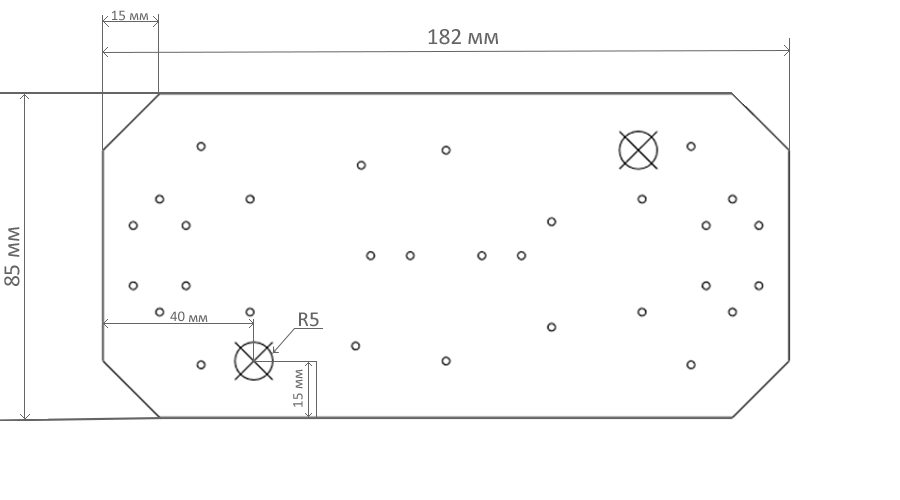
<style>
.page{position:relative;width:900px;height:500px;background:#ffffff}
.page>*{position:absolute;margin:0}
.t1{font:14.7px "Calibri";color:#656565}
.t2{font:23.5px "Calibri";color:#656565}
.t3{font:21.3px "Calibri";color:#656565}
</style>
<div class="page">
<p class="t1" style="left:112px;top:10px;width:36px;height:11px">15 мм</p>
<p class="t2" style="left:428px;top:29px;width:70px;height:16px">182 мм</p>
<p class="t2" style="left:4px;top:227px;width:16px;height:59px;rotate:-90deg">85 мм</p>
<p class="t1" style="left:170px;top:311px;width:38px;height:11px">40 мм</p>
<p class="t3" style="left:299px;top:312px;width:20px;height:15px">R5</p>
<p class="t1" style="left:293px;top:369px;width:10px;height:38px;rotate:-90deg">15 мм</p>
</div>
